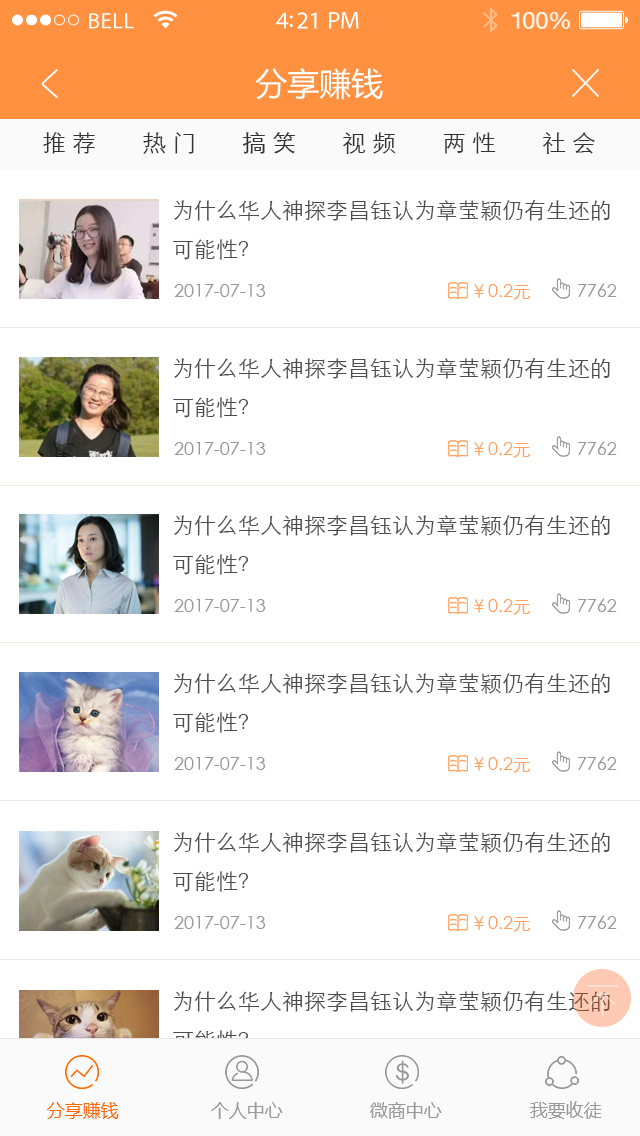
<style>
.page{position:relative;width:640px;height:1136px;background:#ffffff}
.page>*{position:absolute;margin:0}
.t1{font:22.4px "MyriadPro-Regular";letter-spacing:0.02em;color:#ffffff}
.t2{font:24.4px "MyriadPro-Regular";letter-spacing:-0.02em;color:#ffffff}
.t3{font:23.4px "HelveticaNeue";letter-spacing:-0.02em;color:#ffffff}
.t4{font:32px "MicrosoftYaHei";color:#ffffff}
.t5{font:23.5px "STXihei";color:#333333}
.t6{font:22px "STXihei";color:#4d4d4d}
.t7{font:18px "STXihei";color:#999999}
.t8{font:18px "STXihei";color:#fea463}
.t9{font:18px "MicrosoftYaHei";color:#ff6b00}
.t10{font:18px "MicrosoftYaHei";color:#999999}
</style>
<div class="page">
<p class="t1" style="left:89px;top:13px;width:45px;height:16px">BELL</p>
<p class="t2" style="left:276px;top:12px;width:83px;height:17px">4:21 PM</p>
<p class="t3" style="left:511px;top:12px;width:59px;height:17px">100%</p>
<p class="t4" style="left:255px;top:68px;width:128px;height:32px">分享赚钱</p>
<p class="t5" style="left:43px;top:132px;width:52px;height:22px">推 荐</p>
<p class="t5" style="left:143px;top:132px;width:51px;height:22px">热 门</p>
<p class="t5" style="left:242px;top:132px;width:53px;height:22px">搞 笑</p>
<p class="t5" style="left:342px;top:132px;width:53px;height:22px">视 频</p>
<p class="t5" style="left:443px;top:132px;width:53px;height:22px">两 性</p>
<p class="t5" style="left:542px;top:132px;width:53px;height:22px">社 会</p>
<p class="t6" style="left:173px;top:200px;width:437px;height:60px">为什么华人神探李昌钰认为章莹颖仍有生还的<br>可能性？</p>
<p class="t7" style="left:174px;top:284px;width:92px;height:13px">2017-07-13</p>
<p class="t8" style="left:474px;top:284px;width:57px;height:16px">￥0.2元</p>
<p class="t7" style="left:578px;top:283px;width:39px;height:14px">7762</p>
<p class="t6" style="left:173px;top:358px;width:437px;height:60px">为什么华人神探李昌钰认为章莹颖仍有生还的<br>可能性？</p>
<p class="t7" style="left:174px;top:442px;width:92px;height:13px">2017-07-13</p>
<p class="t8" style="left:474px;top:442px;width:57px;height:16px">￥0.2元</p>
<p class="t7" style="left:578px;top:441px;width:39px;height:14px">7762</p>
<p class="t6" style="left:173px;top:515px;width:437px;height:60px">为什么华人神探李昌钰认为章莹颖仍有生还的<br>可能性？</p>
<p class="t7" style="left:174px;top:599px;width:92px;height:13px">2017-07-13</p>
<p class="t8" style="left:474px;top:599px;width:57px;height:16px">￥0.2元</p>
<p class="t7" style="left:578px;top:598px;width:39px;height:14px">7762</p>
<p class="t6" style="left:173px;top:673px;width:437px;height:60px">为什么华人神探李昌钰认为章莹颖仍有生还的<br>可能性？</p>
<p class="t7" style="left:174px;top:757px;width:92px;height:13px">2017-07-13</p>
<p class="t8" style="left:474px;top:757px;width:57px;height:16px">￥0.2元</p>
<p class="t7" style="left:578px;top:756px;width:39px;height:14px">7762</p>
<p class="t6" style="left:173px;top:832px;width:437px;height:60px">为什么华人神探李昌钰认为章莹颖仍有生还的<br>可能性？</p>
<p class="t7" style="left:174px;top:916px;width:92px;height:13px">2017-07-13</p>
<p class="t8" style="left:474px;top:916px;width:57px;height:16px">￥0.2元</p>
<p class="t7" style="left:578px;top:915px;width:39px;height:14px">7762</p>
<p class="t6" style="left:173px;top:991px;width:437px;height:60px">为什么华人神探李昌钰认为章莹颖仍有生还的<br>可能性？</p>
<p class="t9" style="left:47px;top:1102px;width:72px;height:17px">分享赚钱</p>
<p class="t10" style="left:211px;top:1102px;width:72px;height:17px">个人中心</p>
<p class="t10" style="left:370px;top:1102px;width:72px;height:17px">微商中心</p>
<p class="t10" style="left:529px;top:1101px;width:73px;height:18px">我要收徒</p>
</div>
